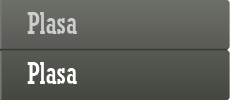
<style>
.page{position:relative;width:230px;height:100px}
.page>*{position:absolute;margin:0}
.t1{font:30px "Rockwell-Condensed";color:#cccecb}
.t2{font:30px "Rockwell-Condensed";color:#fefffe}
</style>
<div class="page">
<p class="t1" style="left:27px;top:12px;width:50px;height:22px">Plasa</p>
<p class="t2" style="left:27px;top:62px;width:50px;height:22px">Plasa</p>
</div>
